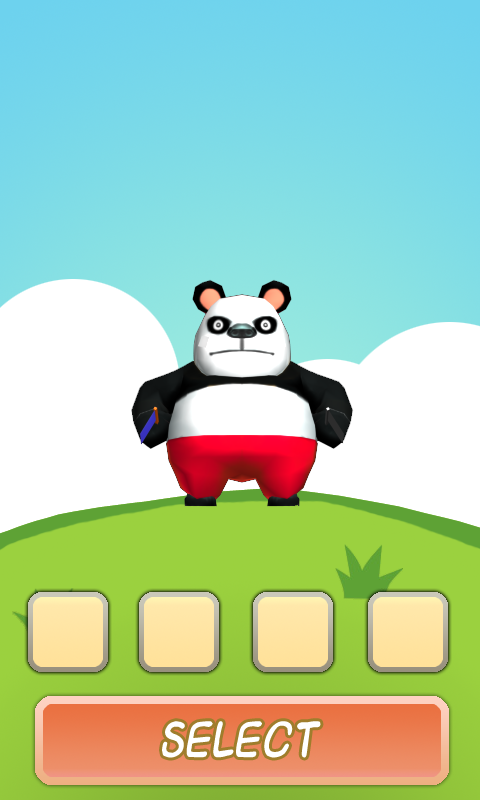
<style>
.page{position:relative;width:480px;height:800px}
.page>*{position:absolute;margin:0}
.t1{font:36px "Universalfruitcake";color:#ffffff}
</style>
<div class="page">
<p class="t1" style="left:162px;top:721px;width:159px;height:37px">SELECT</p>
</div>
